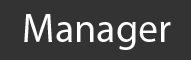
<style>
.page{position:relative;width:191px;height:60px;background:#333333}
.page>*{position:absolute;margin:0}
.t1{font:40.2px "MyriadPro-Regular";color:#fffefe}
</style>
<div class="page">
<p class="t1" style="left:24px;top:14px;width:147px;height:36px">Manager</p>
</div>
